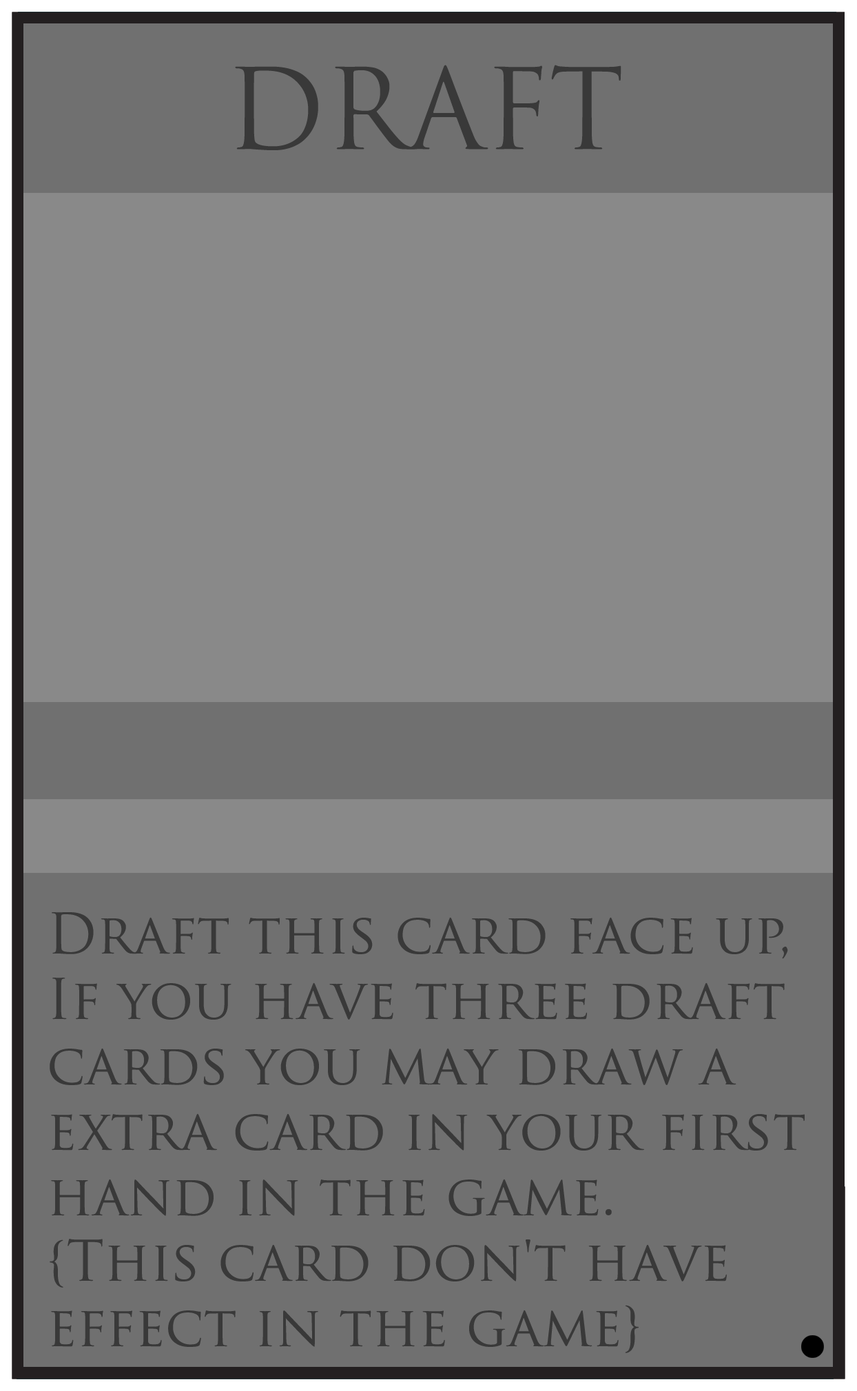
<style>
.page{position:relative;width:857px;height:1391px;background:#707070}
.page>*{position:absolute;margin:0}
.t1{font:109.1px "TrajanPro-Regular";color:#393939}
.t2{font:54.5px "TrajanPro-Regular";color:#393939}
</style>
<div class="page">
<p class="t1" style="left:235px;top:65px;width:387px;height:85px">DRAFT</p>
<p class="t2" style="left:50px;top:912px;width:755px;height:441px">Draft this card face up, <br>If you have three draft<br>cards you may draw a <br>extra card in your first<br>hand in the game.<br>{This card don't have  <br>effect in the game}</p>
</div>
